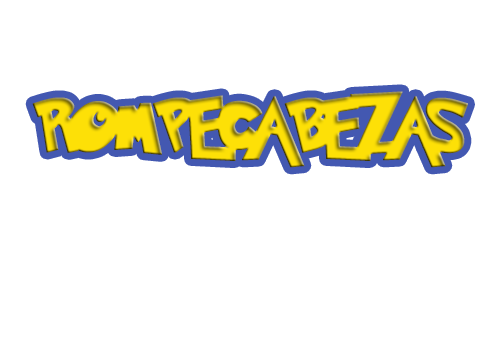
<style>
.page{position:relative;width:500px;height:350px;background:#ffffff}
.page>*{position:absolute;margin:0}
.t1{font:60px "PokemonSolidNormal";letter-spacing:-0.04em;text-transform:uppercase;font-weight:bold}
</style>
<div class="page">
<p class="t1" style="left:32px;top:91px;width:436px;height:77px">rompecabezas</p>
</div>
